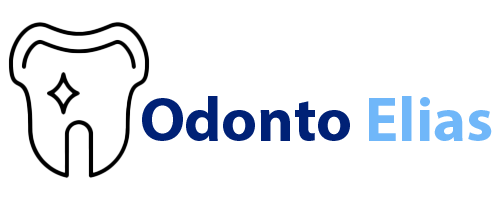
<style>
.page{position:relative;width:500px;height:200px;background:#ffffff}
.page>*{position:absolute;margin:0}
.t1{font:62.4px "MyriadPro-Bold";color:#002176}
.t2{font:62.4px "MyriadPro-Bold";color:#70b7f9}
</style>
<div class="page">
<p class="t1" style="left:142px;top:96px;width:350px;height:45px">Odonto <span class="t2">Elias</span></p>
</div>
